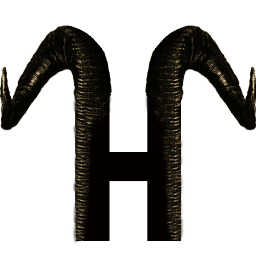
<style>
.page{position:relative;width:256px;height:256px;background:#ffffff}
.page>*{position:absolute;margin:0}
.t1{font:200px "MetalLord";color:#050000}
</style>
<div class="page">
<p class="t1" style="left:75px;top:97px;width:106px;height:144px">h</p>
</div>
